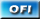
<style>
.page{position:relative;width:40px;height:19px}
.page>*{position:absolute;margin:0}
.t1{font:11.3px "ErasITC-Bold";letter-spacing:0.05em;font-weight:bold}
</style>
<div class="page">
<p class="t1" style="left:9px;top:5px;width:23px;height:9px">OFI</p>
</div>
